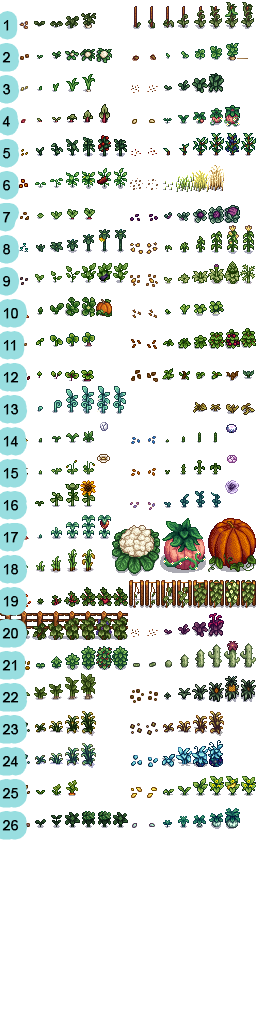
<style>
.page{position:relative;width:256px;height:1024px;background:#ffffff}
.page>*{position:absolute;margin:0}
.t1{font:14px/32px "ArialMT";color:#000000;font-weight:bold}
</style>
<div class="page">
<p class="t1" style="left:2px;top:20px;width:17px;height:811px">1<br>2<br>3<br>4<br>5<br>6<br>7<br>8<br>9<br>10<br>11<br>12<br>13<br>14<br>15<br>16<br>17<br>18<br>19<br>20<br>21<br>22<br>23<br>24<br>25<br>26</p>
</div>
